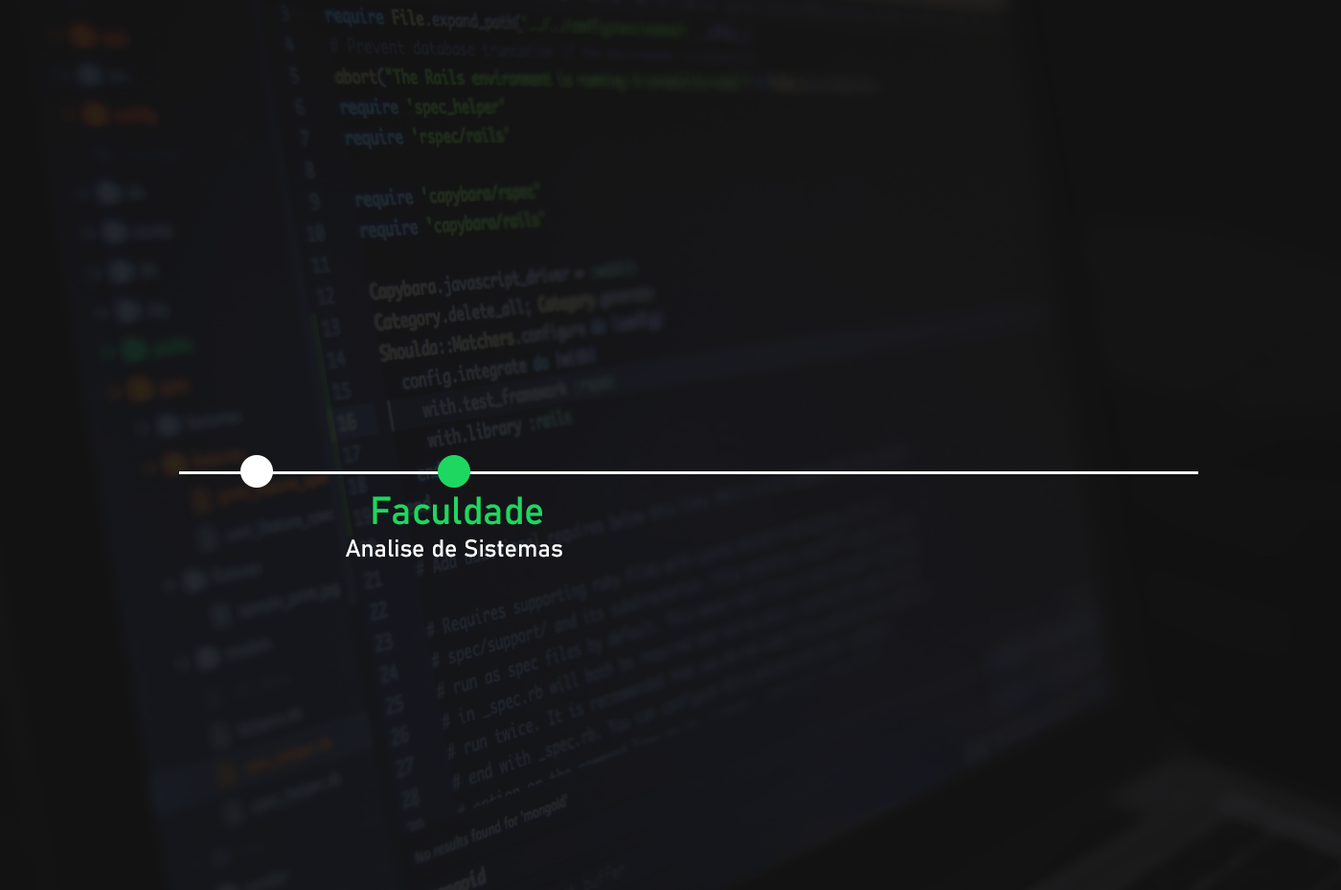
<style>
.page{position:relative;width:1341px;height:890px}
.page>*{position:absolute;margin:0}
.t1{font:38.3px "Bahnschrift";color:#1ed760}
.t2{font:23.9px "Bahnschrift";color:#ffffff}
</style>
<div class="page">
<p class="t1" style="left:372px;top:496px;width:170px;height:29px">Faculdade</p>
<p class="t2" style="left:346px;top:539px;width:216px;height:18px">Analise de Sistemas</p>
</div>
